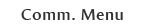
<style>
.page{position:relative;width:144px;height:28px;background:#ffffff}
.page>*{position:absolute;margin:0}
.t1{font:16px "AmiraParadiso";letter-spacing:0.05em;color:#333333}
</style>
<div class="page">
<p class="t1" style="left:21px;top:9px;width:102px;height:11px">Comm. Menu</p>
</div>
